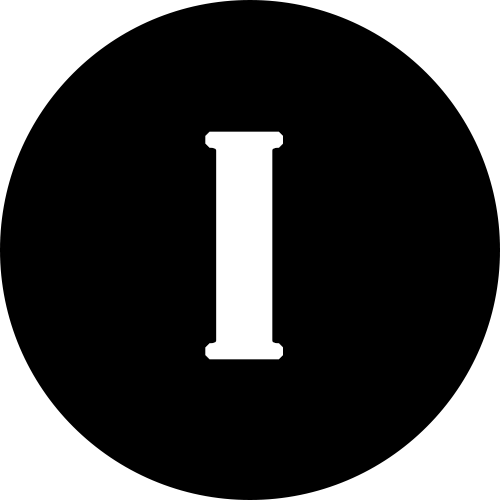
<style>
.page{position:relative;width:500px;height:500px;background:#000000}
.page>*{position:absolute;margin:0}
.t1{font:416.6px "Copperplate";color:#ffffff;text-transform:uppercase;font-weight:bold}
</style>
<div class="page">
<p class="t1" style="left:205px;top:131px;width:78px;height:229px">I</p>
</div>
